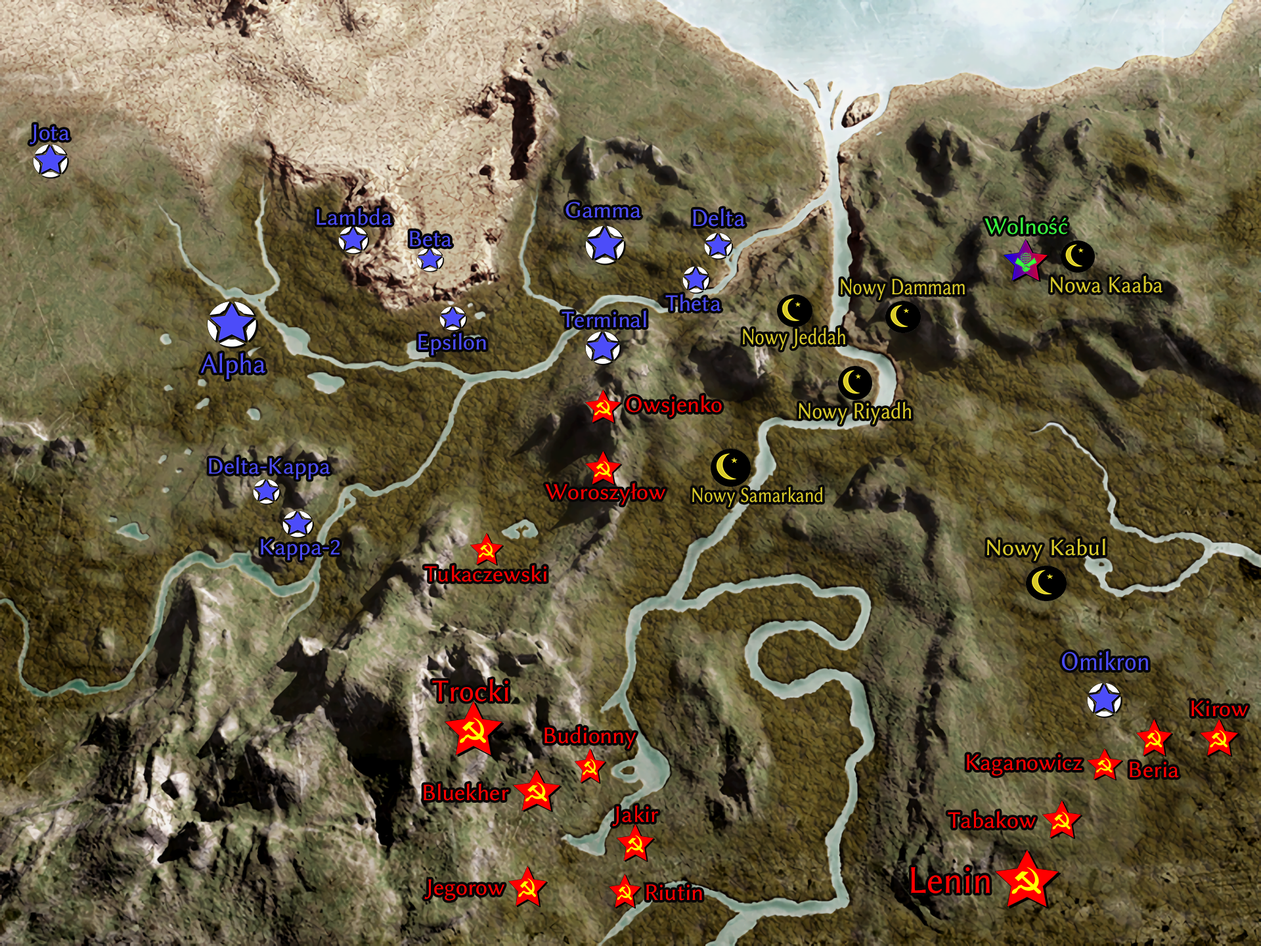
<style>
.page{position:relative;width:1261px;height:946px}
.page>*{position:absolute;margin:0}
.t1{font:23.6px "LinuxBiolinumG";color:#4c4cf9}
.t2{font:25.5px "LinuxBiolinumG";color:#4c4cf9;scale:0.96 1}
.t3{font:23.6px "LinuxBiolinumG";color:#38ff3f}
.t4{font:23.7px "LinuxBiolinumG";color:#d8ca2b;scale:0.8 1}
.t5{font:23.7px "LinuxBiolinumG";color:#d8ca2b;scale:0.91 1}
.t6{font:27.9px "LinuxBiolinumG";color:#4c4cf9;scale:0.97 1}
.t7{font:23.6px "LinuxBiolinumG";color:#ff0000}
.t8{font:23.7px "LinuxBiolinumG";color:#d8ca2b;scale:0.86 1}
.t9{font:23.1px "LinuxBiolinumG";color:#ff0000}
.t10{font:21.6px "LinuxBiolinumG";color:#d8ca2b;scale:0.84 1}
.t11{font:23.6px "LinuxBiolinumG";color:#d8ca2b}
.t12{font:27.3px "LinuxBiolinumG";color:#4c4cf9;scale:0.89 1}
.t13{font:31.6px "LinuxBiolinumG";color:#ff0000;scale:0.96 1}
.t14{font:23.7px "LinuxBiolinumG";color:#ff0000}
.t15{font:39.5px "LinuxBiolinumG";color:#ff0000;scale:0.94 1}
</style>
<div class="page">
<p class="t1" style="left:30px;top:124px;width:40px;height:20px">Jota</p>
<p class="t1" style="left:317px;top:208px;width:75px;height:17px">Lambda</p>
<p class="t1" style="left:565px;top:202px;width:76px;height:16px">Gamma</p>
<p class="t2" style="left:693px;top:208px;width:52px;height:19px">Delta</p>
<p class="t3" style="left:984px;top:217px;width:83px;height:17px">Wolność</p>
<p class="t1" style="left:410px;top:231px;width:42px;height:16px">Beta</p>
<p class="t4" style="left:841px;top:278px;width:124px;height:22px">Nowy Dammam</p>
<p class="t5" style="left:1050px;top:275px;width:112px;height:18px">Nowa Kaaba</p>
<p class="t1" style="left:665px;top:294px;width:56px;height:17px">Theta</p>
<p class="t1" style="left:562px;top:310px;width:84px;height:18px">Terminal</p>
<p class="t4" style="left:743px;top:327px;width:102px;height:23px">Nowy Jeddah</p>
<p class="t1" style="left:418px;top:332px;width:68px;height:23px">Epsilon</p>
<p class="t6" style="left:200px;top:353px;width:65px;height:26px">Alpha</p>
<p class="t7" style="left:626px;top:395px;width:96px;height:22px">Owsjenko</p>
<p class="t8" style="left:799px;top:401px;width:112px;height:23px">Nowy Riyadh</p>
<p class="t1" style="left:209px;top:456px;width:121px;height:23px">Delta-Kappa</p>
<p class="t9" style="left:545px;top:483px;width:120px;height:22px">Woroszyłow</p>
<p class="t10" style="left:692px;top:487px;width:131px;height:20px">Nowy Samarkand</p>
<p class="t1" style="left:261px;top:539px;width:79px;height:21px">Kappa-2</p>
<p class="t11" style="left:987px;top:538px;width:118px;height:23px">Nowy Kabul</p>
<p class="t9" style="left:424px;top:565px;width:122px;height:17px">Tukaczewski</p>
<p class="t12" style="left:1062px;top:651px;width:86px;height:20px">Omikron</p>
<p class="t13" style="left:432px;top:678px;width:76px;height:23px">Trocki</p>
<p class="t7" style="left:1191px;top:700px;width:57px;height:16px">Kirow</p>
<p class="t7" style="left:544px;top:726px;width:92px;height:23px">Budionny</p>
<p class="t7" style="left:967px;top:754px;width:115px;height:22px">Kaganowicz</p>
<p class="t7" style="left:1130px;top:761px;width:49px;height:17px">Beria</p>
<p class="t7" style="left:424px;top:783px;width:85px;height:18px">Bluekher</p>
<p class="t14" style="left:612px;top:804px;width:46px;height:22px">Jakir</p>
<p class="t7" style="left:948px;top:810px;width:88px;height:18px">Tabakow</p>
<p class="t15" style="left:911px;top:867px;width:79px;height:26px">Lenin</p>
<p class="t7" style="left:424px;top:879px;width:80px;height:21px">Jegorow</p>
<p class="t7" style="left:646px;top:884px;width:56px;height:16px">Riutin</p>
</div>
